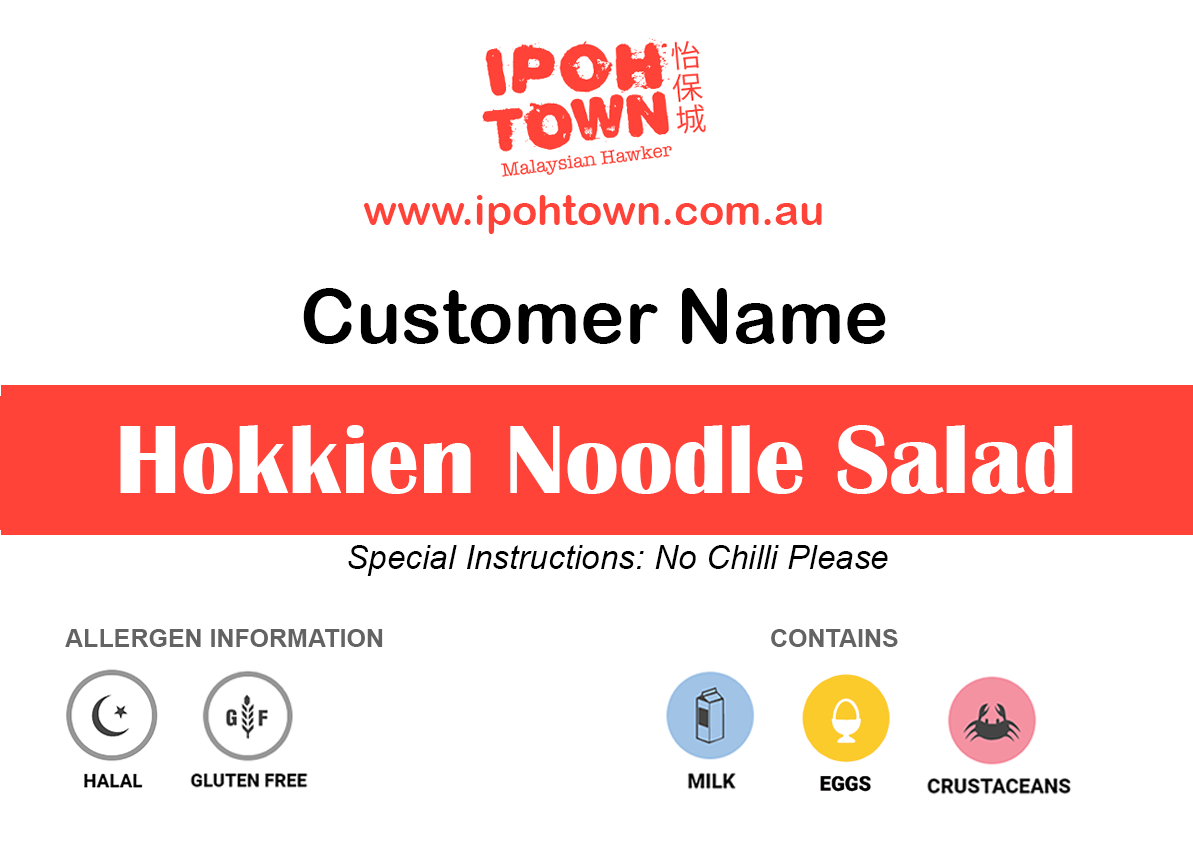
<style>
.page{position:relative;width:1193px;height:850px;background:#ffffff}
.page>*{position:absolute;margin:0}
.t1{font:41.7px "ArialRoundedMTBold";color:#ff4338}
.t2{font:75px "ArialRoundedMTBold";color:#000000}
.t3{font:100px "BritannicBold";color:#ffffff}
.t4{font:33.3px "Arial-ItalicMT";color:#000000}
.t5{font:25px "Arial-BoldMT";color:#636363}
</style>
<div class="page">
<p class="t1" style="left:364px;top:195px;width:458px;height:39px">www.ipohtown.com.au</p>
<p class="t2" style="left:303px;top:288px;width:583px;height:56px">Customer Name</p>
<p class="t3" style="left:120px;top:425px;width:953px;height:69px">Hokkien Noodle Salad</p>
<p class="t4" style="left:348px;top:545px;width:540px;height:31px">Special Instructions: No Chilli Please</p>
<p class="t5" style="left:65px;top:629px;width:318px;height:18px">ALLERGEN INFORMATION</p>
<p class="t5" style="left:771px;top:629px;width:127px;height:18px">CONTAINS</p>
</div>
